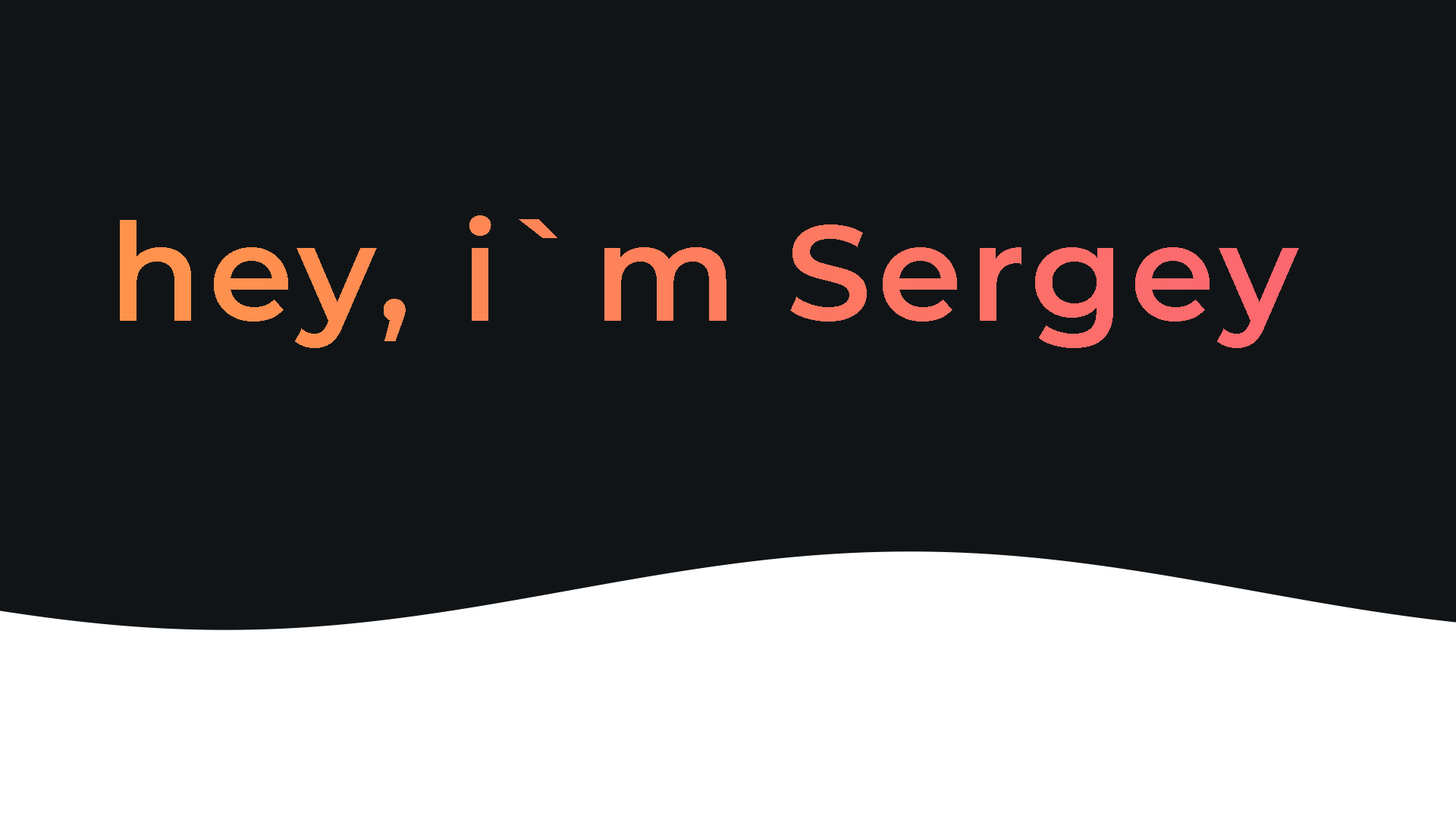
<style>
.page{position:relative;width:1456px;height:819px;background:#111416}
.page>*{position:absolute;margin:0}
.t1{font:136.5px "Montserrat-SemiBold";letter-spacing:0.042em;color:#fd7961}
</style>
<div class="page">
<p class="t1" style="left:120px;top:215px;width:1179px;height:133px">hey, i`m Sergey</p>
</div>
